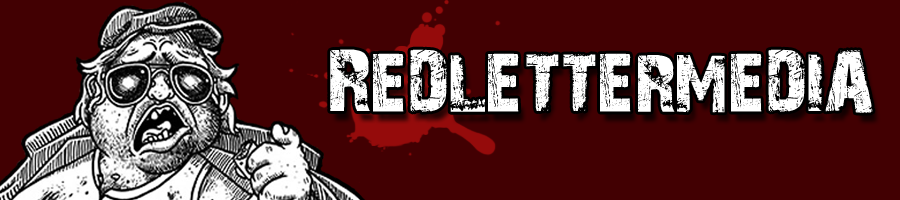
<style>
.page{position:relative;width:900px;height:200px;background:#420002}
.page>*{position:absolute;margin:0}
.t1{font:81px "28DaysLater";color:#ffffff}
.t2{font:88px "28DaysLater";color:#ffffff}
</style>
<div class="page">
<p class="t1" style="left:330px;top:49px;width:543px;height:64px"><span class="t2">R</span>EDLETTERMEDIA</p>
</div>
